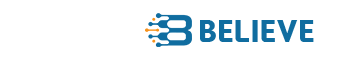
<style>
.page{position:relative;width:340px;height:60px;background:#ffffff}
.page>*{position:absolute;margin:0}
.t1{font:25px "HeadlineR-HM";color:#106da0}
</style>
<div class="page">
<p class="t1" style="left:200px;top:20px;width:114px;height:22px">BELIEVE</p>
</div>
